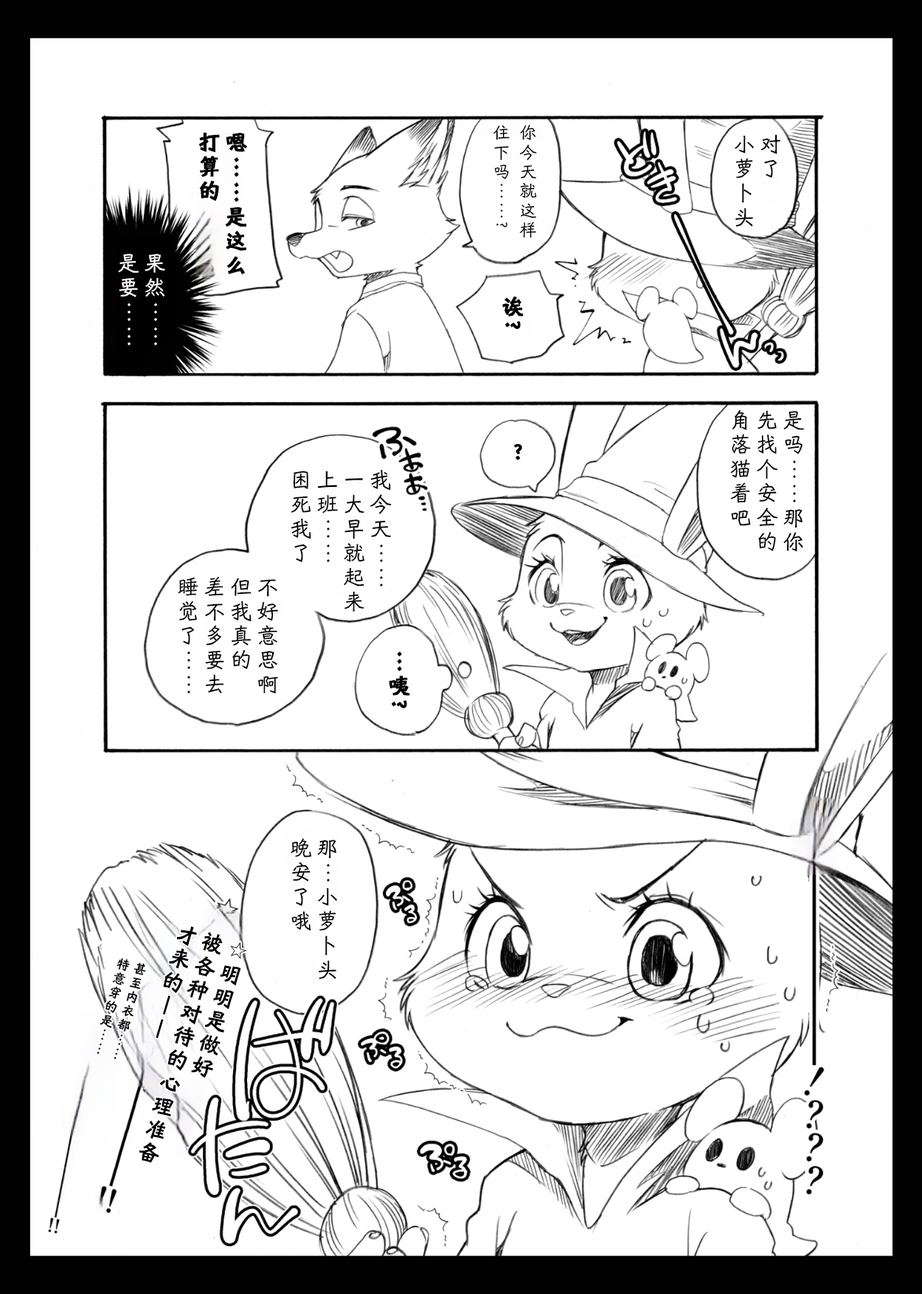
<style>
.page{position:relative;width:922px;height:1294px;background:#ffffff}
.page>*{position:absolute;margin:0}
.t1{font:17.7px/26.5px "HYShiWei55U";letter-spacing:0.1em;color:#000000}
.t2{font:22.1px/26.5px "HYShiWei75U";letter-spacing:0.1em;color:#000000;font-weight:bold}
.t3{font:22.1px/26.5px "HYShiWei55U";letter-spacing:0.1em;color:#000000}
.t4{font:22.1px/26.5px "HYShiWei55U";letter-spacing:0.1em;color:#ffffff}
.t5{font:22.1px "HYShiWei75U";letter-spacing:0.1em;color:#000000;font-weight:bold}
.t6{font:22.1px/26.5px "HYShiWei75U";letter-spacing:0.1em;color:#000000}
.t7{font:13.3px/17.7px "HYShiWei75U";letter-spacing:0.1em;color:#000000}
</style>
<div class="page">
<p class="t1" style="left:493px;top:125px;width:44px;height:113px">你今天就这样<br>住下吗……?</p>
<p class="t2" style="left:198px;top:132px;width:49px;height:142px">嗯……是这么<br>打算的</p>
<p class="t3" style="left:735px;top:134px;width:45px;height:93px">对了<br>小萝卜头</p>
<p class="t4" style="left:118px;top:254px;width:47px;height:91px">果然……<br>是要……</p>
<p class="t5" style="left:502px;top:296px;width:22px;height:33px">诶?</p>
<p class="t3" style="left:730px;top:409px;width:74px;height:143px">是吗……那你<br>先找个安全的<br>角落猫着吧</p>
<p class="t5" style="left:514px;top:444px;width:8px;height:16px">？</p>
<p class="t3" style="left:291px;top:469px;width:101px;height:142px">我今天……<br>一大早就起来<br>上班……<br>困死我了</p>
<p class="t3" style="left:178px;top:576px;width:100px;height:117px">不好意思啊<br>但我真的<br>差不多要去<br>睡觉了……</p>
<p class="t2" style="left:389px;top:651px;width:21px;height:57px">…咦?</p>
<p class="t3" style="left:291px;top:838px;width:46px;height:141px">那…小萝卜头<br>晚安了哦</p>
<p class="t6" style="left:139px;top:926px;width:108px;height:236px;rotate:17deg">☆明明是做好<br>被各种对待的心理准备<br>才来的——</p>
<p class="t7" style="left:97px;top:957px;width:49px;height:102px;rotate:16deg">甚至内衣都……<br>特意穿的是……</p>
</div>
